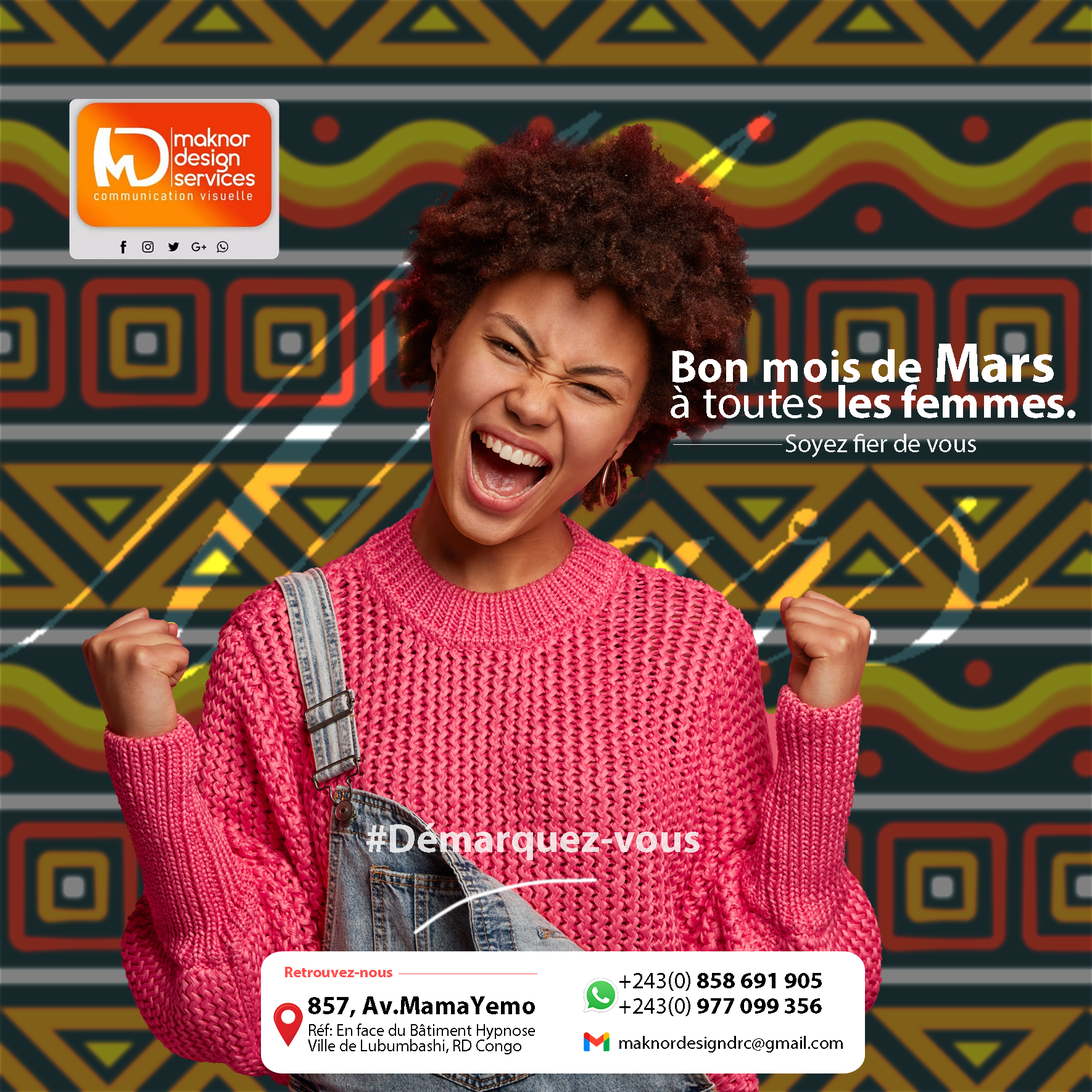
<style>
.page{position:relative;width:1092px;height:1092px}
.page>*{position:absolute;margin:0}
.t1{font:46.2px "MyriadPro-Bold";color:#ffffff}
.t2{font:56.5px "MyriadPro-Bold";color:#ffffff}
.t3{font:46.2px "MyriadPro-Regular";color:#ffffff}
.t4{font:25.7px "MyriadPro-Regular";color:#ffffff}
.t5{font:41.1px "MyriadPro-Bold";color:#f5dde0}
.t6{font:15.4px "MyriadPro-Bold";color:#ff5151}
.t7{font:23.1px/25.7px "MyriadPro-Bold";color:#000000}
.t8{font:23.1px/25.7px "MyriadPro-Regular";color:#000000}
.t9{font:16.7px/15.4px "MyriadPro-Regular";color:#000000}
.t10{font:18px "MyriadPro-Regular";color:#000000}
</style>
<div class="page">
<p class="t1" style="left:671px;top:344px;width:404px;height:74px">Bon mois de<span class="t2"> Mars  </span><span class="t3">à toutes </span>les femmes.</p>
<p class="t4" style="left:786px;top:434px;width:190px;height:23px;opacity:0.92">Soyez fier de vous</p>
<p class="t5" style="left:366px;top:823px;width:334px;height:37px">#Démarquez-vous</p>
<p class="t6" style="left:285px;top:967px;width:107px;height:10px">Retrouvez-nous</p>
<p class="t7" style="left:619px;top:972px;width:203px;height:44px"><span class="t8">+243(0)</span> 858 691 905<br><span class="t8">+243(0)</span> 977 099 356</p>
<p class="t9" style="left:308px;top:1024px;width:227px;height:30px">Réf: En face du Bâtiment Hypnose Ville de Lubumbashi, RD Congo</p>
<p class="t10" style="left:619px;top:1036px;width:224px;height:17px">maknordesigndrc@gmail.com</p>
</div>
